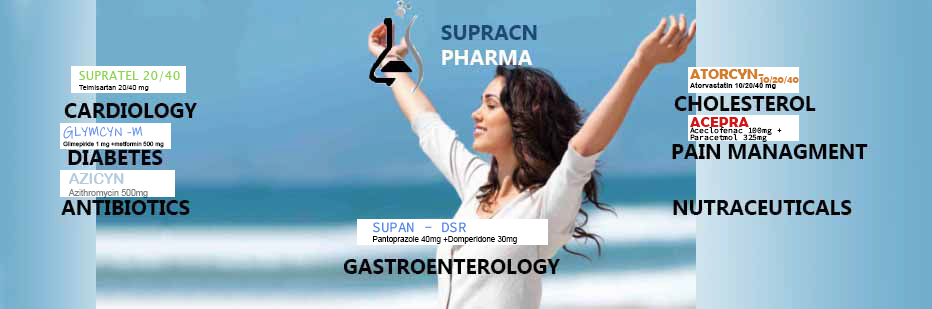
<style>
.page{position:relative;width:932px;height:309px}
.page>*{position:absolute;margin:0}
.t1{font:7.3px/9.7px "ArialMT";color:#000000}
.t2{font:12.4px/9.7px "LucidaSansUnicode";color:#8cd44c}
.t3{font:7.3px/4.2px "Arial-BoldMT";color:#000000}
.t4{font:14.7px/4.2px "BerlinSansFBDemi-Bold";color:#d47d2a}
.t5{font:9.8px/4.2px "BerlinSansFBDemi-Bold";color:#d47d2a}
.t6{font:6.1px/10.2px "ArialMT";color:#000000}
.t7{font:13.8px/10.2px "InkFree";color:#5087e9}
.t8{font:8.1px/6.3px "SourceCodeVariable-Roman";color:#000000}
.t9{font:15.3px/6.3px "BerlinSansFBDemi-Bold";color:#d31515}
.t10{font:8.7px/12.9px "ArialMT"}
.t11{font:14.6px/12.9px "ArialRoundedMTBold";text-transform:uppercase}
.t12{font:7.9px/10.6px "ArialMT";color:#000000}
.t13{font:14.3px/10.6px "SourceCodeVariable-Roman";color:#5087e9}
</style>
<div class="page">
<p class="t1" style="left:79px;top:71px;width:101px;height:20px"><span class="t2">SUPRATEL 20/40<br></span>Telmisartan 20/40 mg</p>
<p class="t3" style="left:690px;top:69px;width:109px;height:20px"><span class="t4">ATORCYN-<br>                   </span><span class="t5">10/20/40<br></span>Atorvastatin 10/20/40 mg</p>
<p class="t6" style="left:63px;top:126px;width:101px;height:22px"><span class="t7">GLYMCYN -M<br></span>Glimepiride 1 mg +metformin 500 mg</p>
<p class="t8" style="left:690px;top:117px;width:92px;height:25px"><span class="t9">ACEPRA<br></span>Aceclofenac 100mg + <br>Paracetmol 325mg</p>
<p class="t10" style="left:68px;top:173px;width:80px;height:25px"><span class="t11">AZICYN<br></span>Azithromycin 500mg</p>
<p class="t12" style="left:373px;top:222px;width:144px;height:22px"><span class="t13">SUPAN - DSR<br></span>Pantoprazole 40mg +Domperidone 30mg</p>
</div>
